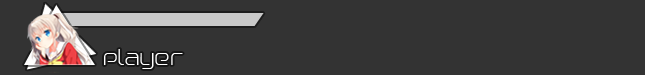
<style>
.page{position:relative;width:645px;height:75px;background:#333333}
.page>*{position:absolute;margin:0}
.t1{font:20.8px "BirdmanLight";color:#ffffff;scale:0.93 1}
</style>
<div class="page">
<p class="t1" style="left:104px;top:49px;width:79px;height:20px">Player</p>
</div>
